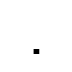
<style>
.page{position:relative;width:72px;height:72px;background:#ffffff}
.page>*{position:absolute;margin:0}
.t1{font:60px "AppleSymbols";letter-spacing:0.02em;color:#000000}
</style>
<div class="page">
<p class="t1" style="left:33px;top:49px;width:7px;height:5px">.</p>
</div>
